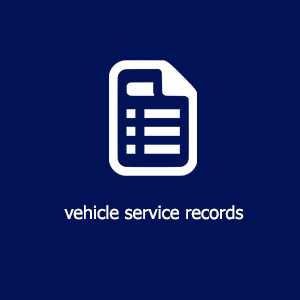
<style>
.page{position:relative;width:300px;height:300px;background:#021257}
.page>*{position:absolute;margin:0}
.t1{font:18px "Tahoma";color:#ffffff}
</style>
<div class="page">
<p class="t1" style="left:64px;top:205px;width:180px;height:15px">vehicle service records</p>
</div>
